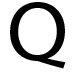
<style>
.page{position:relative;width:75px;height:75px;background:#ffffff}
.page>*{position:absolute;margin:0}
.t1{font:84.2px "MyriadPro-Regular";color:#000000;scale:1.05 1}
</style>
<div class="page">
<p class="t1" style="left:10px;top:2px;width:56px;height:67px">Q</p>
</div>
